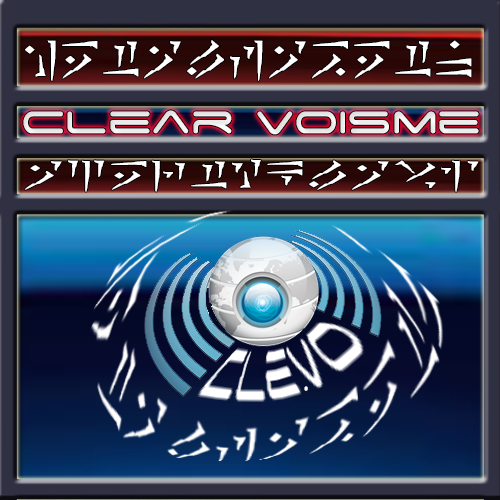
<style>
.page{position:relative;width:500px;height:500px}
.page>*{position:absolute;margin:0}
.t1{font:50px "Dovahkiin";color:#ffffff}
.t2{font:50px "SpaceAge";color:#ffffff;scale:0.97 1}
.t3{font:38.5px "Dovahkiin";color:#ffffff;scale:1.3 1}
.t4{font:36.6px "SpaceAge";color:#ffffff;scale:0.75 1}
</style>
<div class="page">
<p class="t1" style="left:25px;top:40px;width:447px;height:41px">hetalfabetn</p>
<p class="t2" style="left:23px;top:110px;width:456px;height:25px">Clear Voisme</p>
<p class="t3" style="left:25px;top:159px;width:454px;height:33px">azertyclavi</p>
<p class="t4" style="left:304px;top:386px;width:4px;height:5px">.</p>
</div>
